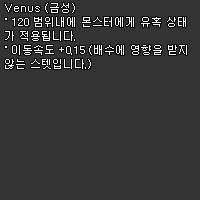
<style>
.page{position:relative;width:200px;height:200px;background:#333333}
.page>*{position:absolute;margin:0}
.t1{font:11px/14px "Dotum";color:#ffffff}
</style>
<div class="page">
<p class="t1" style="left:5px;top:3px;width:182px;height:66px">Venus (금성)<br>˚ 120 범위내에 몬스터에게 유혹 상태<br>가 적용됩니다.<br>˚ 이동속도 +0.15 (배수에 영향을 받지<br>않는 스텟입니다.)</p>
</div>
